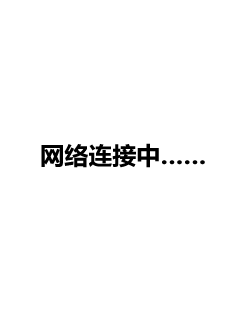
<style>
.page{position:relative;width:240px;height:320px;background:#ffffff}
.page>*{position:absolute;margin:0}
.t1{font:24px "MicrosoftYaHeiBold";color:#000000}
</style>
<div class="page">
<p class="t1" style="left:41px;top:143px;width:164px;height:25px">网络连接中……</p>
</div>
